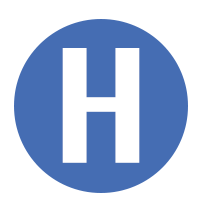
<style>
.page{position:relative;width:202px;height:212px;background:#ffffff}
.page>*{position:absolute;margin:0}
.t1{font:160.9px "DINEngschrift";color:#ffffff;scale:1.44 1}
</style>
<div class="page">
<p class="t1" style="left:62px;top:48px;width:78px;height:115px">H</p>
</div>
